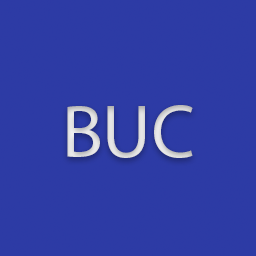
<style>
.page{position:relative;width:256px;height:256px;background:#2d3ba5}
.page>*{position:absolute;margin:0}
.t1{font:75px "MyriadPro-Regular";color:#dddddd}
</style>
<div class="page">
<p class="t1" style="left:67px;top:105px;width:126px;height:53px">BUC</p>
</div>
